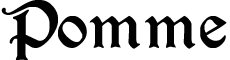
<style>
.page{position:relative;width:230px;height:60px;background:#ffffff}
.page>*{position:absolute;margin:0}
.t1{font:48px "BerryRotunda-Regular";color:#010101}
</style>
<div class="page">
<p class="t1" style="left:1px;top:0px;width:226px;height:61px">Pomme</p>
</div>
